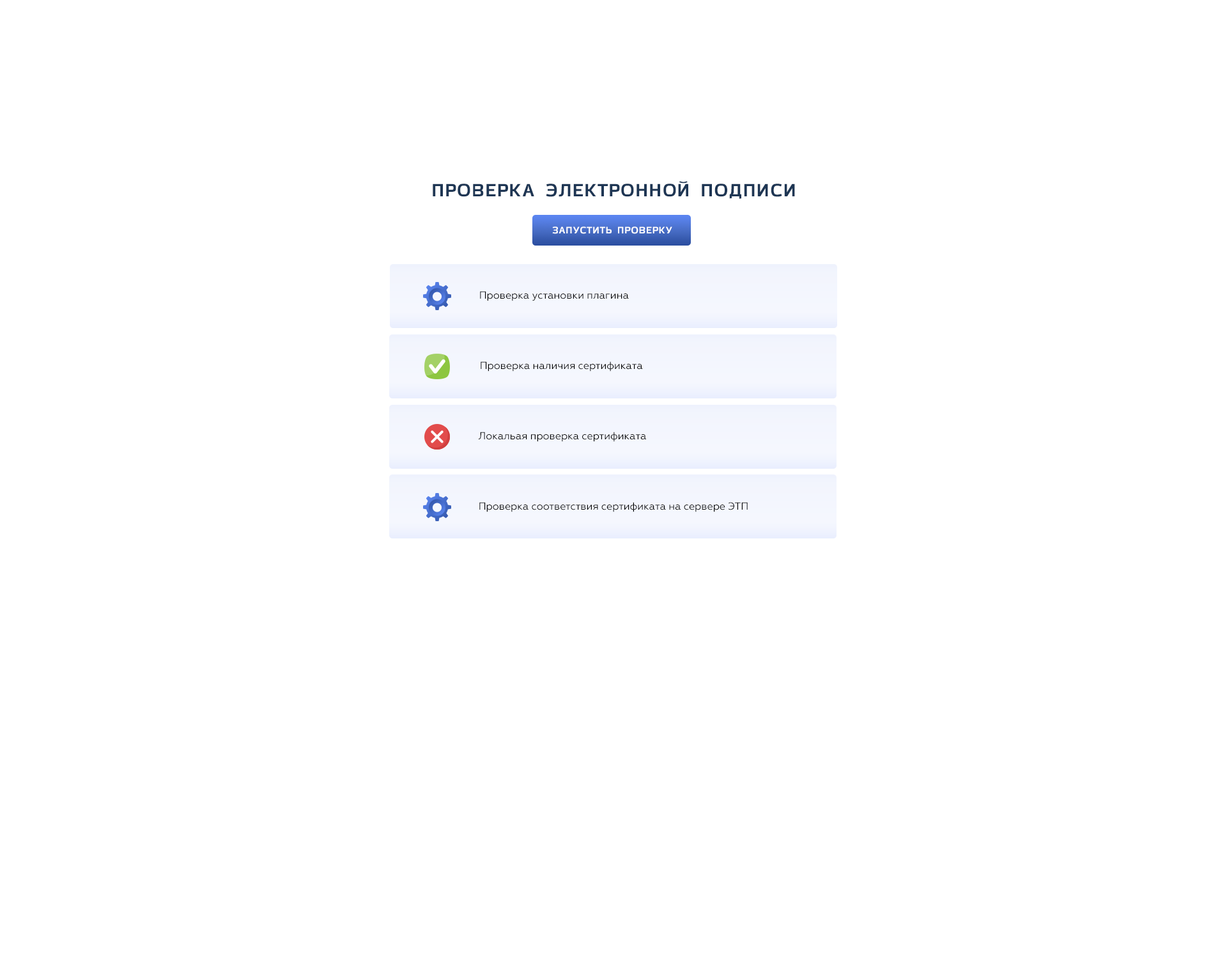
<style>
.page{position:relative;width:1227px;height:972px;background:#ffffff}
.page>*{position:absolute;margin:0}
.t1{font:19.2px "AzoftSans-Bold";letter-spacing:0.025em;color:#1e3654;text-transform:uppercase}
.t2{font:10.2px "AzoftSans-Bold";letter-spacing:0.025em;color:#ffffff;text-transform:uppercase}
.t3{font:10.2px "Geometria";color:#000000}
</style>
<div class="page">
<p class="t1" style="left:433px;top:181px;width:362px;height:18px">ПРОВЕРКА ЭЛЕКТРОННОЙ ПОДПИСИ</p>
<p class="t2" style="left:552px;top:226px;width:120px;height:8px">Запустить проверку</p>
<p class="t3" style="left:480px;top:291px;width:149px;height:10px">Проверка установки плагина</p>
<p class="t3" style="left:481px;top:361px;width:162px;height:10px">Проверка наличия сертификата</p>
<p class="t3" style="left:479px;top:431px;width:167px;height:11px">Локальая проверка сертификата</p>
<p class="t3" style="left:479px;top:502px;width:269px;height:10px">Проверка соответствия сертификата на сервере ЭТП</p>
</div>
